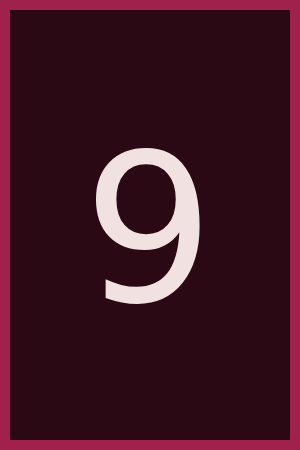
<style>
.page{position:relative;width:300px;height:450px;background:#2a0914}
.page>*{position:absolute;margin:0}
.t1{font:206px "DejaVuSans";color:#f2e1e1}
</style>
<div class="page">
<p class="t1" style="left:95px;top:148px;width:105px;height:156px">9</p>
</div>
